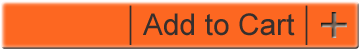
<style>
.page{position:relative;width:360px;height:50px;background:#fd6721}
.page>*{position:absolute;margin:0}
.t1{font:30px "ArialMT";color:#362f2d}
.t2{font:54.1px "ArialMT"}
</style>
<div class="page">
<p class="t1" style="left:143px;top:13px;width:152px;height:23px">Add to Cart</p>
<p class="t2" style="left:321px;top:12px;width:26px;height:26px">+</p>
</div>
